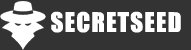
<style>
.page{position:relative;width:191px;height:50px;background:#333333}
.page>*{position:absolute;margin:0}
.t1{font:25px "Impact";letter-spacing:0.05em;color:#ffffff}
</style>
<div class="page">
<p class="t1" style="left:51px;top:11px;width:130px;height:22px">SECRETSEED</p>
</div>
